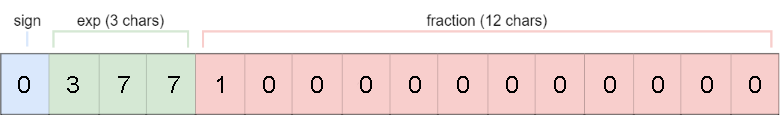
<style>
.page{position:relative;width:780px;height:115px;background:#ffffff}
.page>*{position:absolute;margin:0}
.t1{font:23.5px "ArialMT";letter-spacing:0.06em;color:#000000;scale:1.1 1}
</style>
<div class="page">
<p class="t1" style="left:18px;top:76px;width:12px;height:17px">0</p>
<p class="t1" style="left:67px;top:76px;width:12px;height:17px">3</p>
<p class="t1" style="left:118px;top:76px;width:12px;height:17px">7</p>
<p class="t1" style="left:168px;top:76px;width:12px;height:17px">7</p>
<p class="t1" style="left:217px;top:76px;width:6px;height:17px">1</p>
<p class="t1" style="left:263px;top:76px;width:12px;height:17px">0</p>
<p class="t1" style="left:311px;top:76px;width:12px;height:17px">0</p>
<p class="t1" style="left:360px;top:76px;width:12px;height:17px">0</p>
<p class="t1" style="left:409px;top:76px;width:12px;height:17px">0</p>
<p class="t1" style="left:457px;top:76px;width:12px;height:17px">0</p>
<p class="t1" style="left:506px;top:76px;width:12px;height:17px">0</p>
<p class="t1" style="left:554px;top:76px;width:12px;height:17px">0</p>
<p class="t1" style="left:604px;top:76px;width:12px;height:17px">0</p>
<p class="t1" style="left:652px;top:76px;width:12px;height:17px">0</p>
<p class="t1" style="left:701px;top:76px;width:12px;height:17px">0</p>
<p class="t1" style="left:749px;top:76px;width:12px;height:17px">0</p>
</div>
